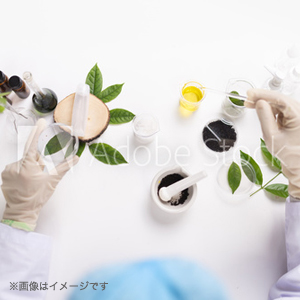
<style>
.page{position:relative;width:300px;height:300px}
.page>*{position:absolute;margin:0}
.t1{font:10px "HiraKakuPro-W3";color:#626262}
</style>
<div class="page">
<p class="t1" style="left:9px;top:281px;width:99px;height:10px">※画像はイメージです</p>
</div>
